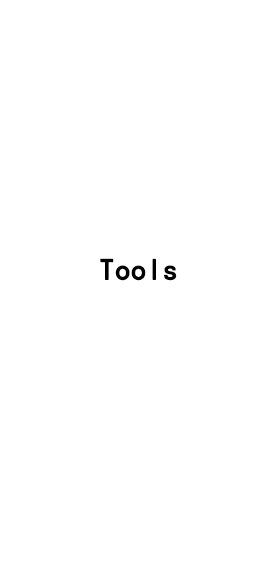
<style>
.page{position:relative;width:265px;height:570px;background:#ffffff}
.page>*{position:absolute;margin:0}
.t1{font:30px "SimHei";color:#000000;font-weight:bold}
</style>
<div class="page">
<p class="t1" style="left:100px;top:258px;width:77px;height:23px">Tools</p>
</div>
